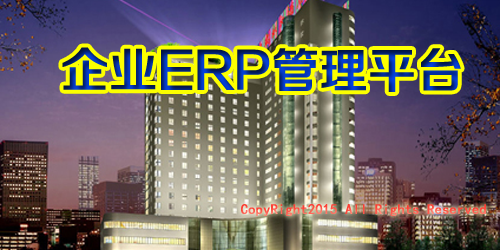
<style>
.page{position:relative;width:500px;height:250px}
.page>*{position:absolute;margin:0}
.t1{font:47.2px "FZZZHUNHJW--GB1-0";font-weight:bold}
.t2{font:14.2px "SimHei";font-weight:bold}
</style>
<div class="page">
<p class="t1" style="left:62px;top:47px;width:399px;height:45px">企业ERP管理平台</p>
<p class="t2" style="left:241px;top:204px;width:245px;height:12px">CopyRight2015 All Rights Reserved</p>
</div>
